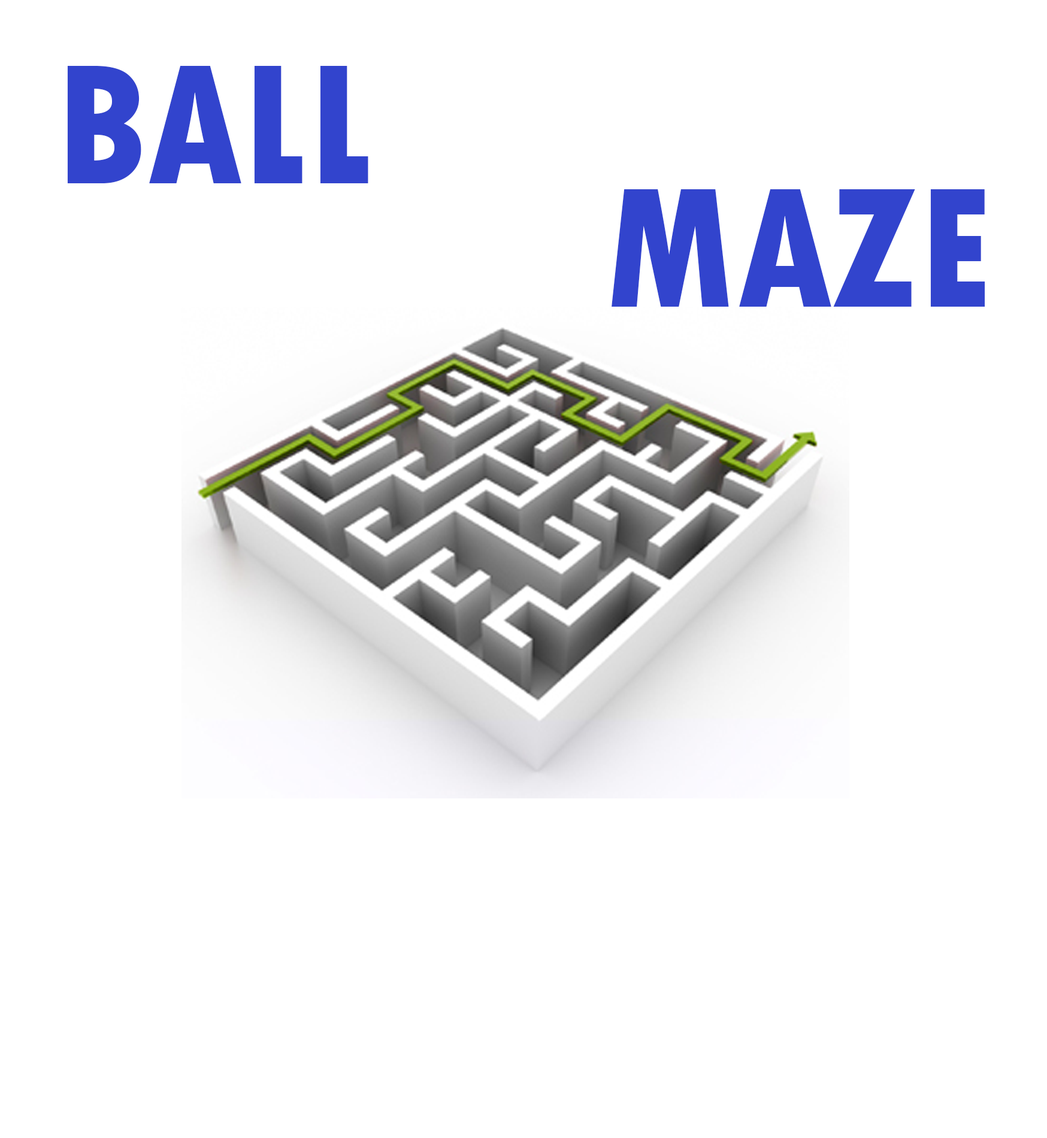
<style>
.page{position:relative;width:1047px;height:1138px;background:#ffffff}
.page>*{position:absolute;margin:0}
.t1{font:179.8px "TwCenMT-CondensedExtraBold";color:#3244cd}
</style>
<div class="page">
<p class="t1" style="left:67px;top:66px;width:302px;height:117px">BALL</p>
<p class="t1" style="left:612px;top:189px;width:374px;height:118px">MAZE</p>
</div>
